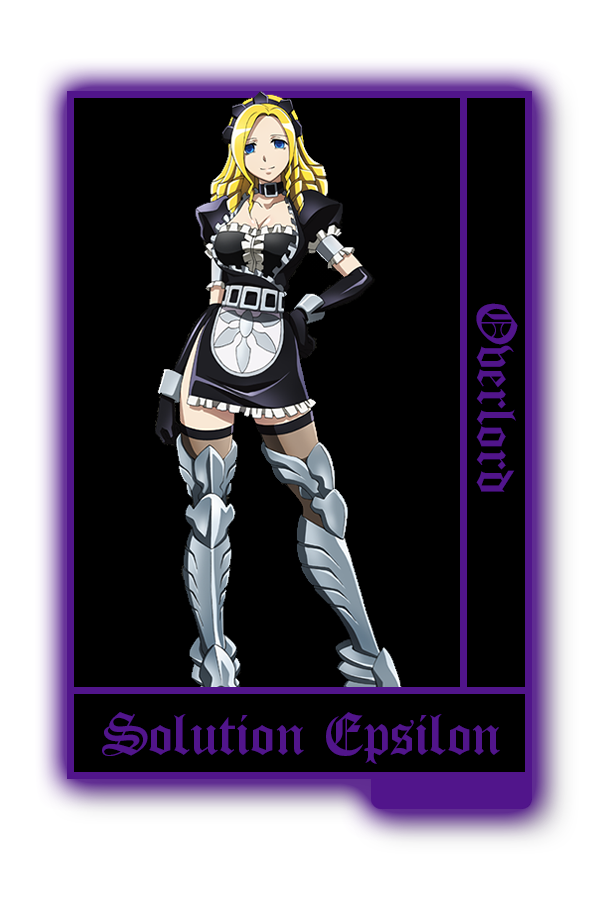
<style>
.page{position:relative;width:600px;height:900px;background:#000000}
.page>*{position:absolute;margin:0}
.t1{font:61.5px "OldLondon";color:#51158b}
.t2{font:65.2px "OldLondon";color:#51158b}
</style>
<div class="page">
<p class="t1" style="left:476px;top:303px;width:42px;height:189px;rotate:90deg">Overlord</p>
<p class="t2" style="left:102px;top:712px;width:398px;height:52px">Solution Epsilon</p>
</div>
